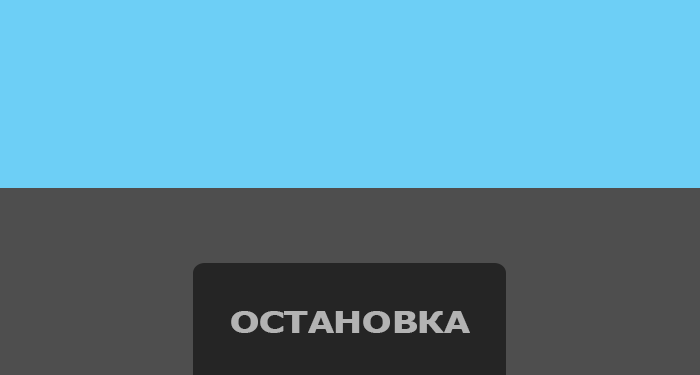
<style>
.page{position:relative;width:700px;height:375px;background:#6dcff6}
.page>*{position:absolute;margin:0}
.t1{font:29.6px "Tahoma-Bold";color:#b3b3b3;scale:1.28 1}
</style>
<div class="page">
<p class="t1" style="left:231px;top:311px;width:239px;height:22px">ОСТАНОВКА</p>
</div>
